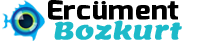
<style>
.page{position:relative;width:203px;height:41px;background:#ffffff}
.page>*{position:absolute;margin:0}
.t1{font:25.8px "Exo-Bold";color:#000000;font-weight:bold;scale:1.13 1}
.t2{font:23.8px "Lemon-Regular";color:#1cbac9;font-weight:bold;scale:1.13 1}
</style>
<div class="page">
<p class="t1" style="left:48px;top:0px;width:131px;height:20px">Ercüment</p>
<p class="t2" style="left:54px;top:20px;width:128px;height:20px">Bozkurt</p>
</div>
